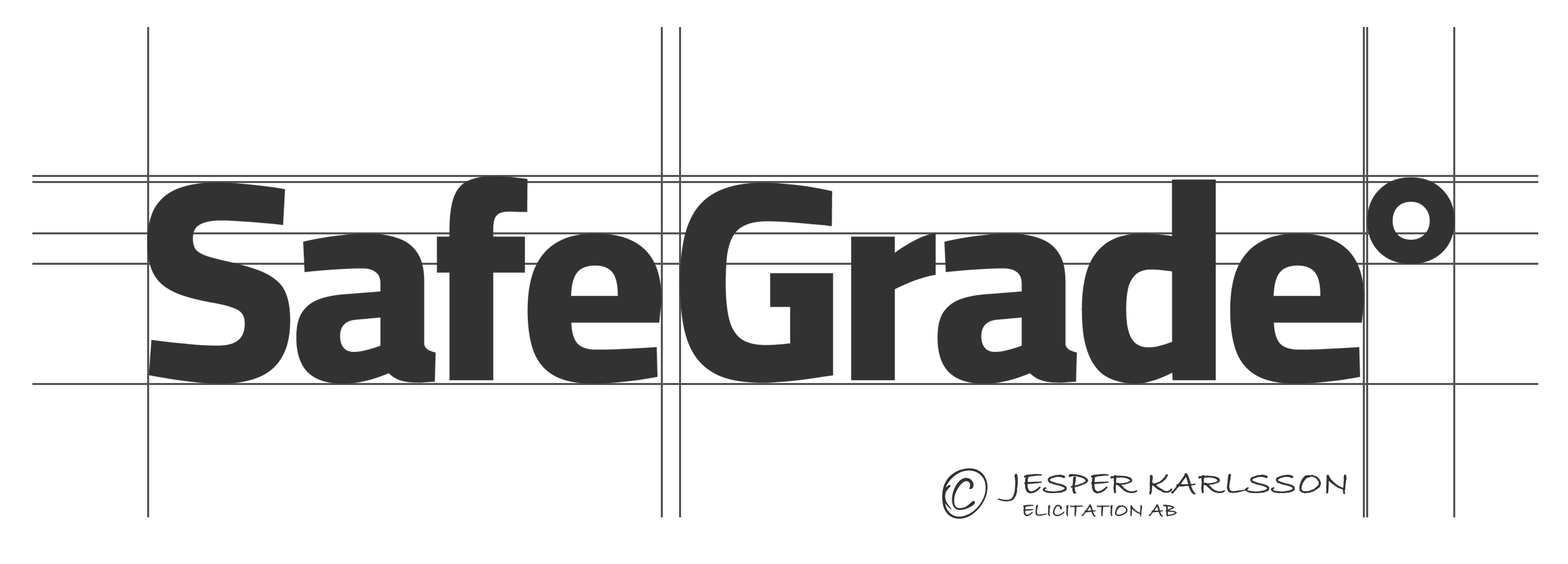
<style>
.page{position:relative;width:1568px;height:564px;background:#ffffff}
.page>*{position:absolute;margin:0}
.t1{font:83.8px "Bacalisties";color:#323232;text-transform:uppercase}
.t2{font:34.5px/22.4px "BradleyHandITC";color:#323232;text-transform:uppercase;font-weight:bold}
.t3{font:42px/22.4px "BradleyHandITC";color:#323232;text-transform:uppercase;font-weight:bold}
.t4{font:19.6px/22.4px "BradleyHandITC";color:#323232;text-transform:uppercase;font-weight:bold}
</style>
<div class="page">
<p class="t1" style="left:942px;top:468px;width:46px;height:50px">©</p>
<p class="t2" style="left:998px;top:472px;width:349px;height:44px"><span class="t3"> </span>Jesper karlsson<br><span class="t4">    Elicitation AB</span></p>
</div>
